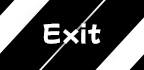
<style>
.page{position:relative;width:144px;height:70px;background:#000000}
.page>*{position:absolute;margin:0}
.t1{font:22.9px "MochiyPopPOne-Regular";letter-spacing:0.04em;color:#ffffff}
</style>
<div class="page">
<p class="t1" style="left:43px;top:23px;width:58px;height:21px">Exit</p>
</div>
